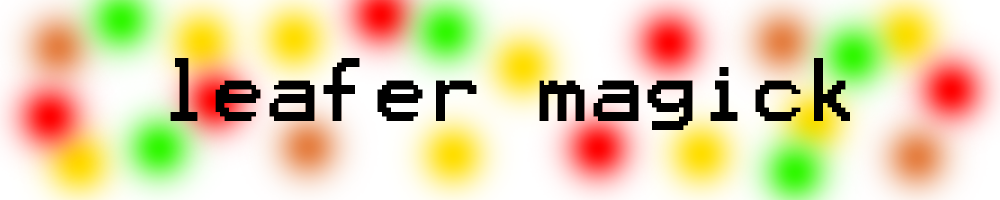
<style>
.page{position:relative;width:1000px;height:200px}
.page>*{position:absolute;margin:0}
.t1{font:72px "Terminal";color:#000000}
</style>
<div class="page">
<p class="t1" style="left:170px;top:58px;width:680px;height:72px">leafer magick</p>
</div>
